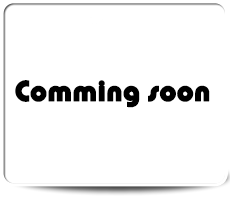
<style>
.page{position:relative;width:230px;height:200px;background:#ffffff}
.page>*{position:absolute;margin:0}
.t1{font:30px "PumpDemiBoldLetPlain";color:#000000;font-weight:bold}
</style>
<div class="page">
<p class="t1" style="left:15px;top:80px;width:195px;height:28px">Comming soon</p>
</div>
